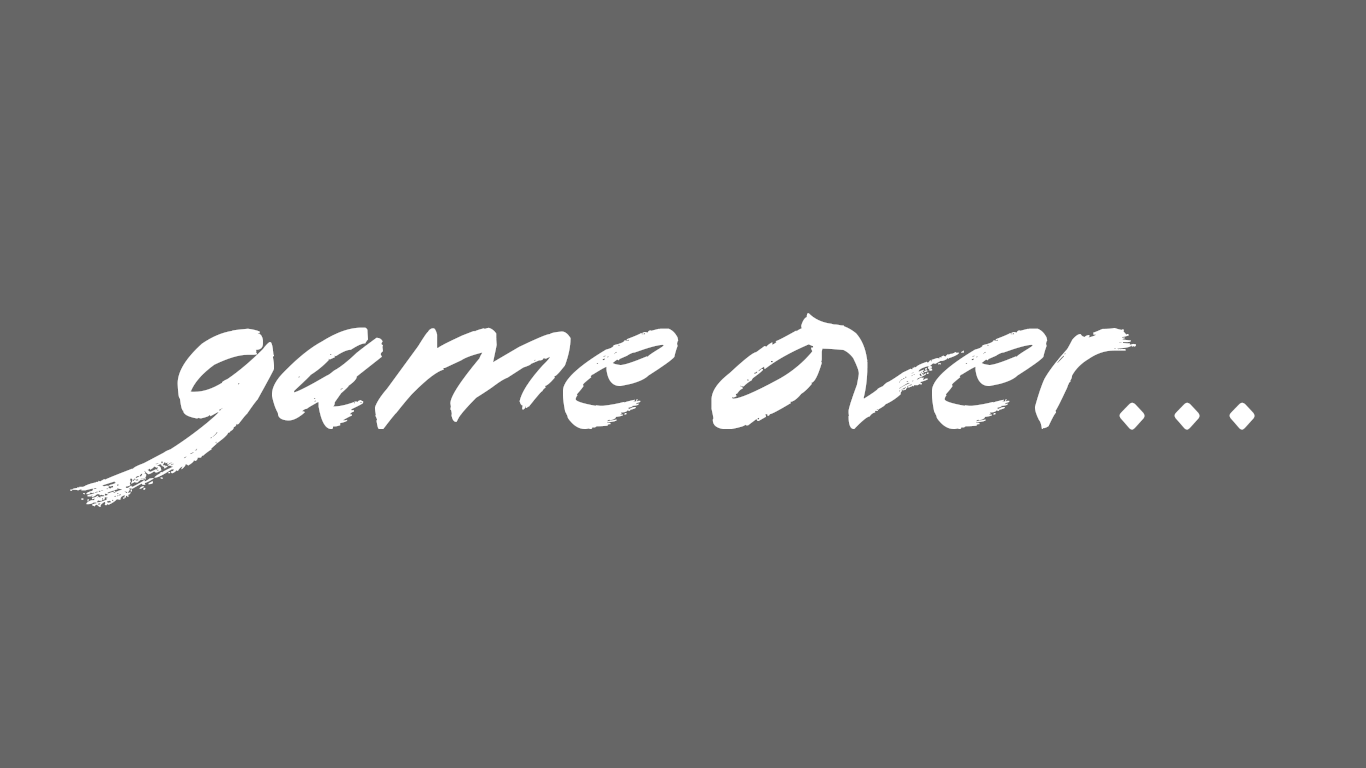
<style>
.page{position:relative;width:1366px;height:768px;background:#666666}
.page>*{position:absolute;margin:0}
.t1{font:202px "BeginningYoga";color:#ffffff}
</style>
<div class="page">
<p class="t1" style="left:70px;top:313px;width:1185px;height:194px">Game Over...</p>
</div>
